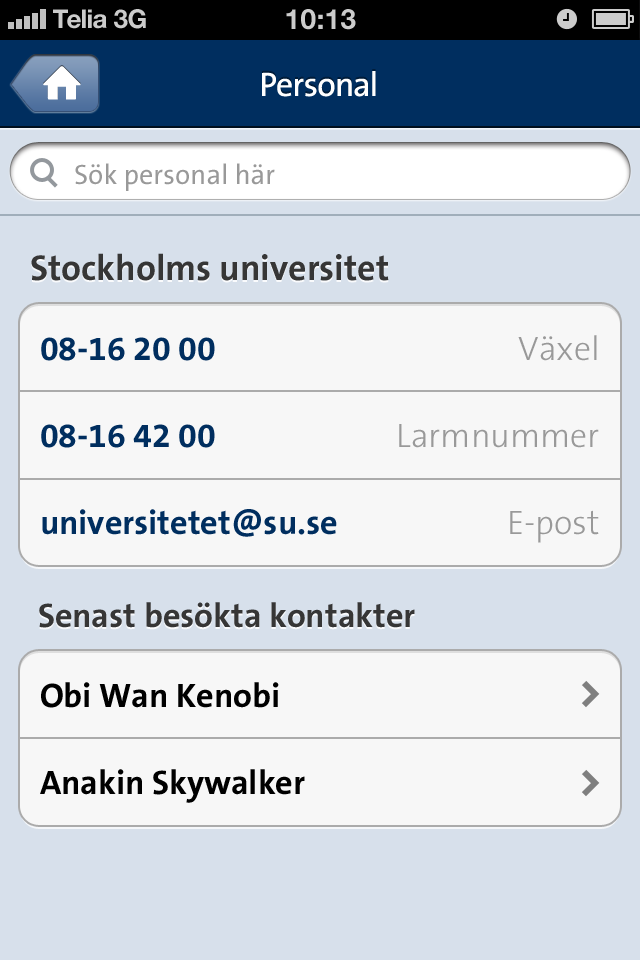
<style>
.page{position:relative;width:640px;height:960px;background:#f7f7f7}
.page>*{position:absolute;margin:0}
.t1{font:26px "HelveticaNeue-Bold";color:#cccccc}
.t2{font:26px "HelveticaNeue-Bold";color:#cccccc;text-transform:uppercase}
.t3{font:28px "HelveticaNeue-Bold";color:#cccccc;text-transform:uppercase}
.t4{font:34px "TheSansB-W5Plain";letter-spacing:-0.015em;color:#ffffff}
.t5{font:28px "TheSansB-W5Plain";color:#999999}
.t6{font:36px "TheSansB-W7Bold";color:#363636}
.t7{font:34px/87px "TheSansB-W7Bold";color:#002e5f}
.t8{font:34px/87px "TheSansB-W3Light";color:#999999}
.t9{font:34px "TheSansB-W7Bold";color:#363636}
.t10{font:34px/87px "TheSansB-W7Bold";color:#000000}
</style>
<div class="page">
<p class="t1" style="left:53px;top:9px;width:54px;height:20px">Telia</p>
<p class="t2" style="left:114px;top:9px;width:32px;height:20px">3G</p>
<p class="t3" style="left:286px;top:9px;width:70px;height:21px">10:13</p>
<p class="t4" style="left:262px;top:71px;width:114px;height:26px">Personal</p>
<p class="t5" style="left:75px;top:163px;width:200px;height:28px">Sök personal här</p>
<p class="t6" style="left:31px;top:253px;width:358px;height:28px">Stockholms universitet</p>
<p class="t7" style="left:41px;top:337px;width:296px;height:200px">08-16 20 00<br>08-16 42 00<br>universitetet@su.se</p>
<p class="t8" style="left:399px;top:335px;width:200px;height:208px;text-align:right">Växel<br>Larmnummer<br>E-post</p>
<p class="t9" style="left:39px;top:602px;width:376px;height:26px">Senast besökta kontakter</p>
<p class="t10" style="left:40px;top:682px;width:265px;height:121px">Obi Wan Kenobi<br>Anakin Skywalker</p>
</div>
